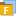
<style>
.page{position:relative;width:16px;height:16px;background:#f4b209}
.page>*{position:absolute;margin:0}
.t1{font:10px "SegoeUI-Bold";color:#fefeff}
</style>
<div class="page">
<p class="t1" style="left:4px;top:7px;width:5px;height:7px">F</p>
</div>
